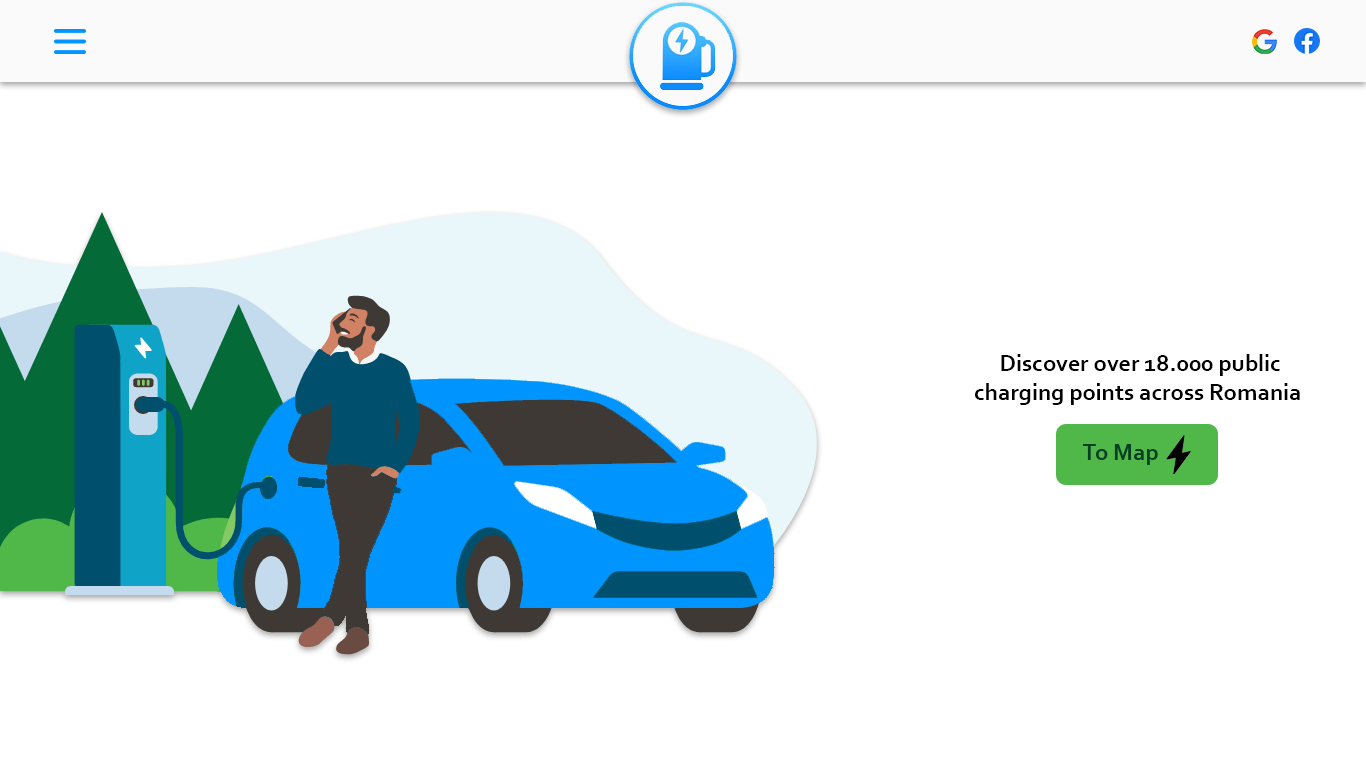
<style>
.page{position:relative;width:1366px;height:768px;background:#ffffff}
.page>*{position:absolute;margin:0}
.t1{font:24px "Corbel-Bold";color:#000000}
.t2{font:24px "Corbel-Bold";color:#043f22}
</style>
<div class="page">
<p class="t1" style="left:975px;top:354px;width:325px;height:51px;text-align:center">Discover over 18.000 public<br>charging points across Romania</p>
<p class="t2" style="left:1082px;top:444px;width:76px;height:21px">To Map</p>
</div>
